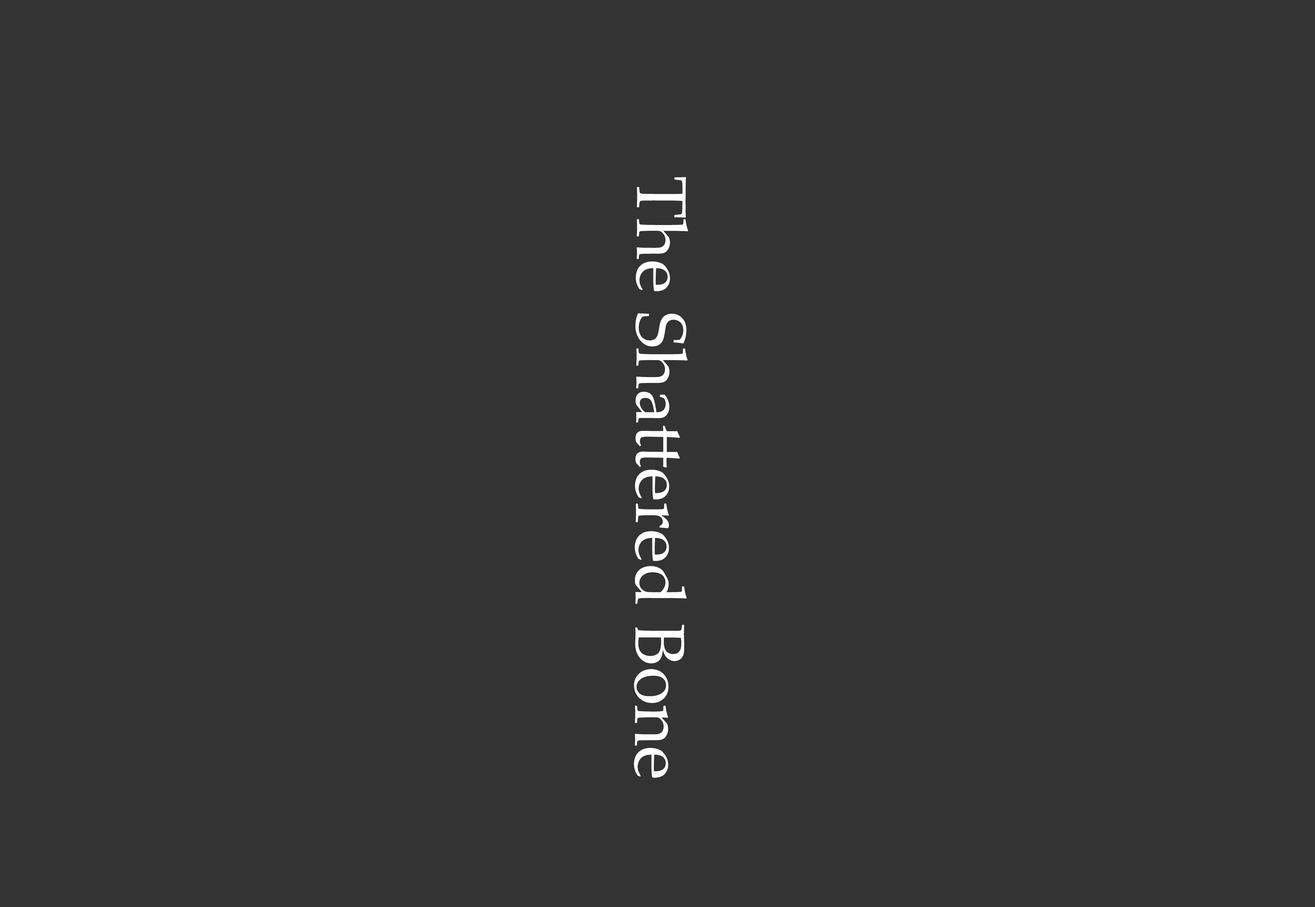
<style>
.page{position:relative;width:1315px;height:907px;background:#333333}
.page>*{position:absolute;margin:0}
.t1{font:70.4px "PalatinoLinotype-Roman";color:#ffffff}
</style>
<div class="page">
<p class="t1" style="left:634px;top:177px;width:54px;height:601px;rotate:90deg">The Shattered Bone</p>
</div>
